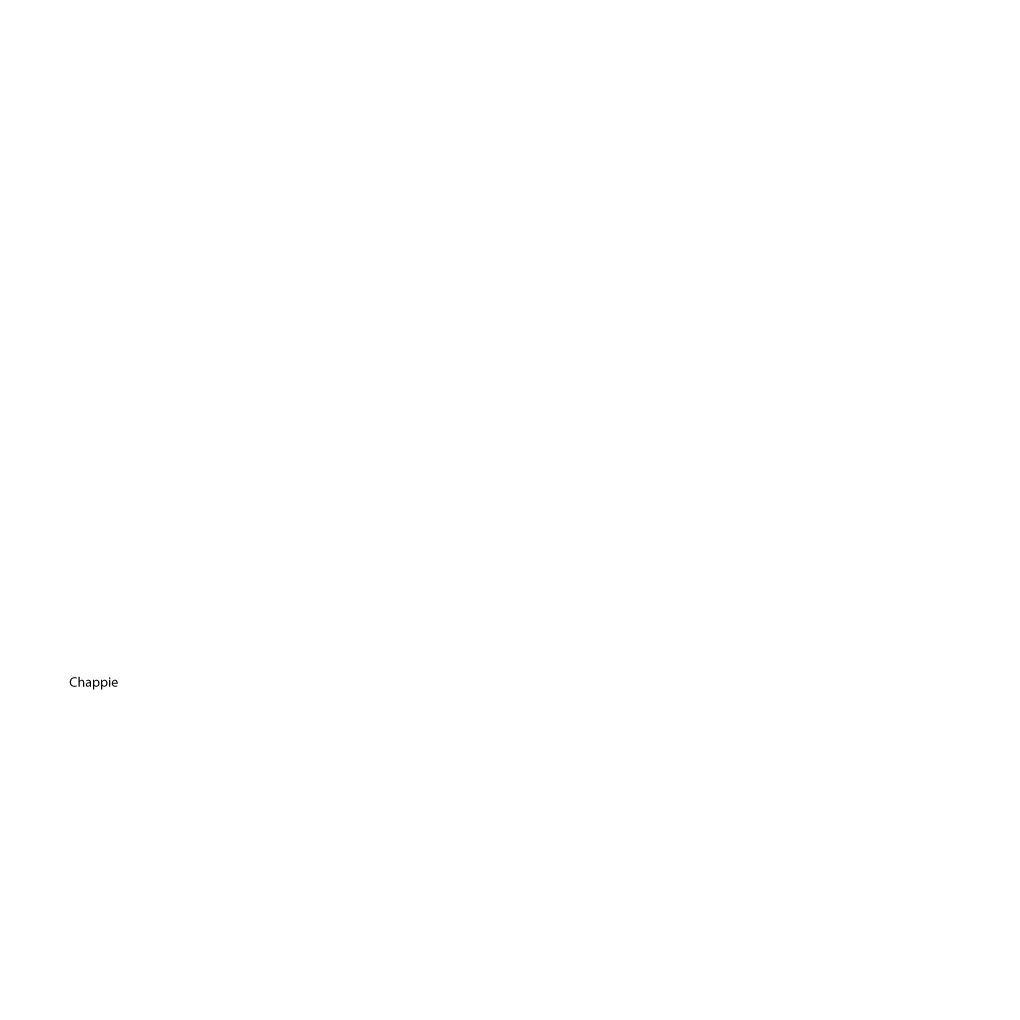
<style>
.page{position:relative;width:1020px;height:1020px;background:#ffffff}
.page>*{position:absolute;margin:0}
.t1{font:14px "MyriadPro-Regular";color:#000000}
</style>
<div class="page">
<p class="t1" style="left:69px;top:676px;width:49px;height:14px">Chappie</p>
</div>
